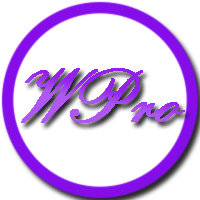
<style>
.page{position:relative;width:200px;height:200px;background:#ffffff}
.page>*{position:absolute;margin:0}
.t1{font:72px "EmbassyBT-Regular";font-weight:bold}
</style>
<div class="page">
<p class="t1" style="left:21px;top:68px;width:164px;height:55px">WPro</p>
</div>
